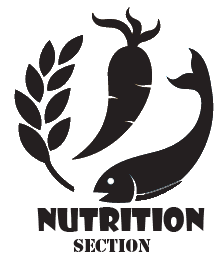
<style>
.page{position:relative;width:222px;height:258px;background:#ffffff}
.page>*{position:absolute;margin:0}
.t1{font:31.3px "ShowcardGothic-Reg";color:#241f20}
.t2{font:17.3px "StencilStd";color:#241f20}
</style>
<div class="page">
<p class="t1" style="left:37px;top:207px;width:168px;height:45px">NUTRiTION<br> <span class="t2">Section</span></p>
</div>
